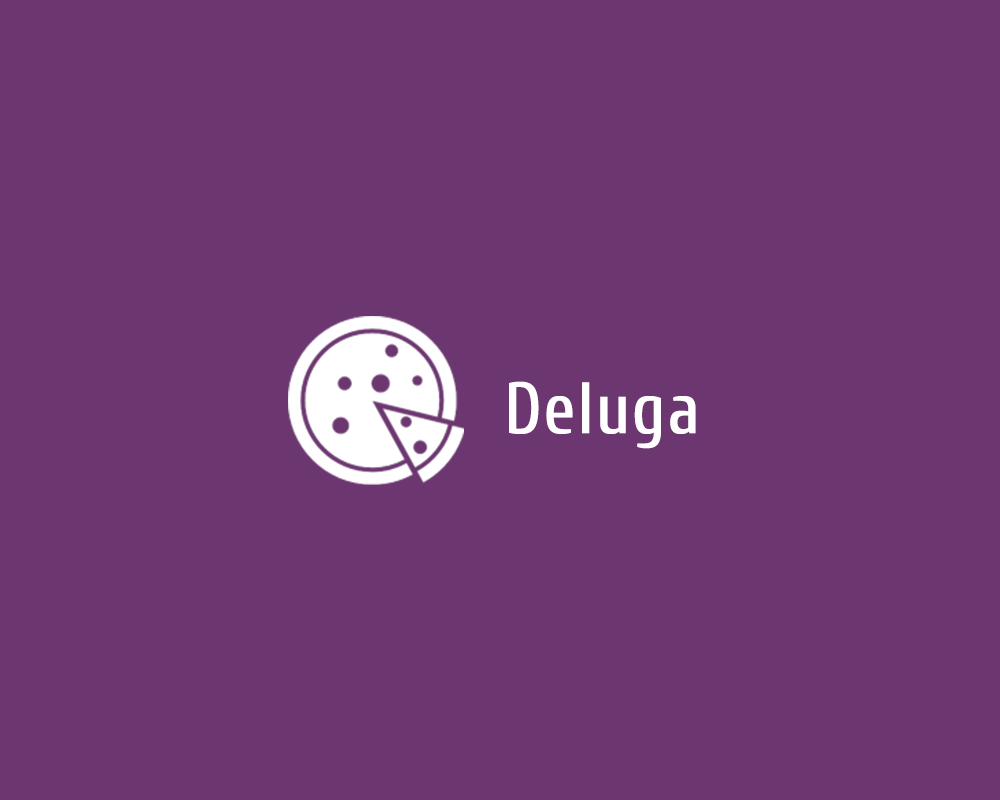
<style>
.page{position:relative;width:1000px;height:800px;background:#6c3670}
.page>*{position:absolute;margin:0}
.t1{font:72px "Cuprum-Regular";color:#ffffff;font-weight:bold}
</style>
<div class="page">
<p class="t1" style="left:509px;top:381px;width:187px;height:68px">Deluga</p>
</div>
